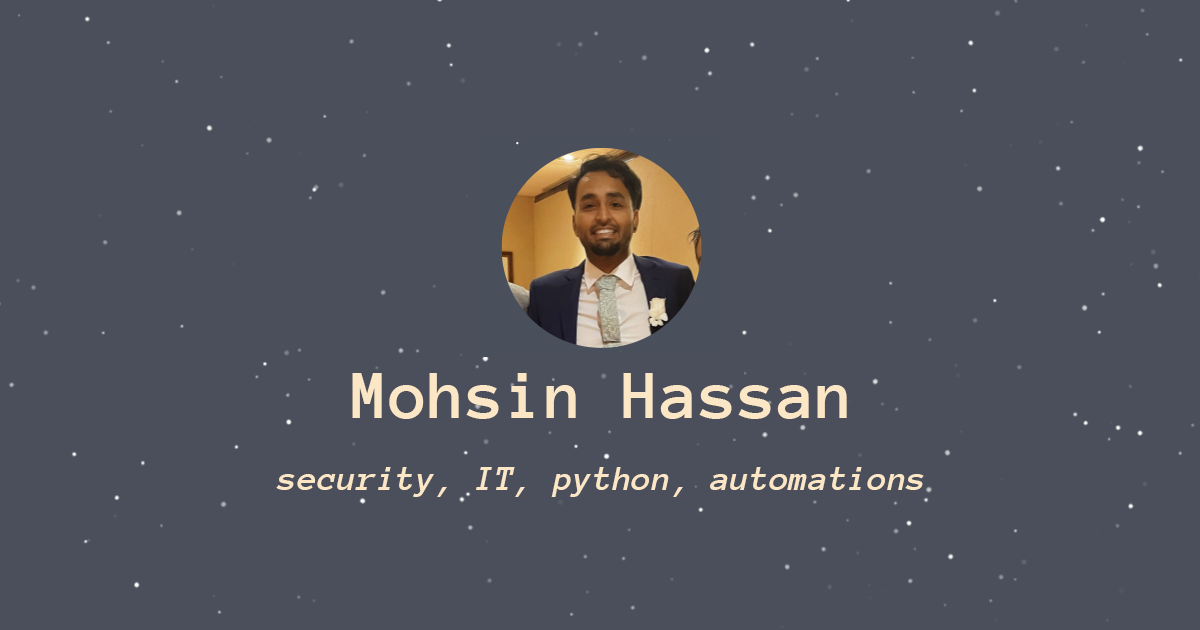
<style>
.page{position:relative;width:1200px;height:630px;background:#4a4f5b}
.page>*{position:absolute;margin:0}
.t1{font:71.1px "AnonymousPro-Bold";color:#fbe6c6}
.t2{font:36px "AnonymousPro-BoldItalic";color:#fbe6c6}
</style>
<div class="page">
<p class="t1" style="left:352px;top:373px;width:495px;height:46px">Mohsin Hassan</p>
<p class="t2" style="left:276px;top:467px;width:648px;height:30px">security, IT, python, automations</p>
</div>
